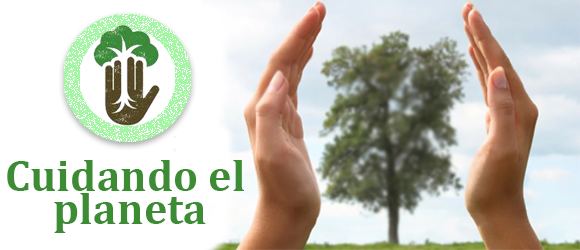
<style>
.page{position:relative;width:580px;height:250px;background:#ffffff}
.page>*{position:absolute;margin:0}
.t1{font:44.3px/33.2px "Cambria-Bold";color:#3c8c34}
</style>
<div class="page">
<p class="t1" style="left:7px;top:160px;width:237px;height:73px;text-align:center">Cuidando el <br>planeta</p>
</div>
